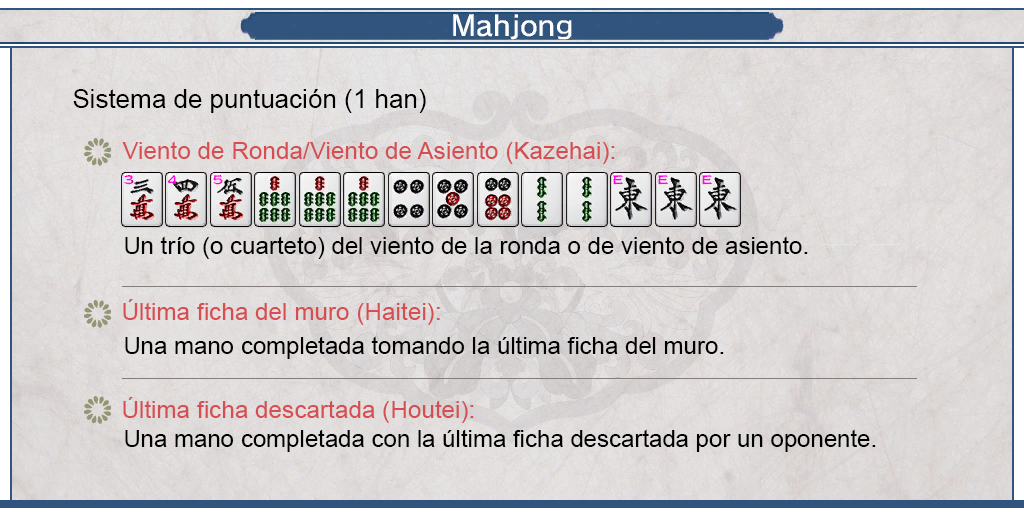
<style>
.page{position:relative;width:1024px;height:512px}
.page>*{position:absolute;margin:0}
.t1{font:26px "ArialMT";color:#000000}
.t2{font:24px "ArialMT";color:#d64d52}
.t3{font:24px "ArialMT";color:#000000}
</style>
<div class="page">
<p class="t1" style="left:73px;top:89px;width:353px;height:24px">Sistema de puntuación (1 han)</p>
<p class="t2" style="left:122px;top:141px;width:493px;height:23px">Viento de Ronda/Viento de Asiento (Kazehai):</p>
<p class="t3" style="left:125px;top:236px;width:683px;height:23px">Un trío (o cuarteto) del viento de la ronda o de viento de asiento.</p>
<p class="t2" style="left:123px;top:299px;width:317px;height:26px">Última ficha del muro (Haitei):</p>
<p class="t3" style="left:125px;top:336px;width:599px;height:23px">Una mano completada tomando la última ficha del muro.</p>
<p class="t2" style="left:123px;top:397px;width:351px;height:26px">Última ficha descartada (Houtei):</p>
<p class="t3" style="left:125px;top:429px;width:751px;height:23px">Una mano completada con la última ficha descartada por un oponente.</p>
</div>
